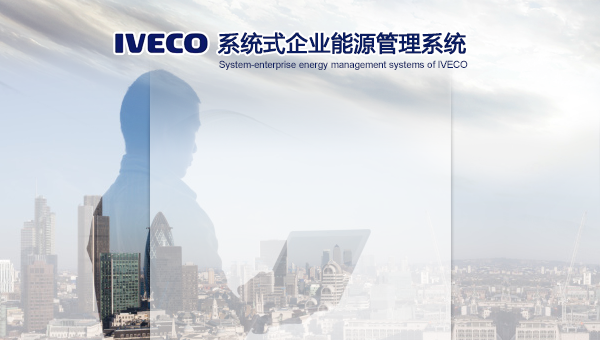
<style>
.page{position:relative;width:600px;height:340px}
.page>*{position:absolute;margin:0}
.t1{font:22px "MicrosoftYaHei";color:#0a1c60;font-weight:bold}
.t2{font:10px "ArialMT";color:#0a1c60}
</style>
<div class="page">
<p class="t1" style="left:218px;top:32px;width:248px;height:23px">系统式企业能源管理系统</p>
<p class="t2" style="left:219px;top:60px;width:249px;height:10px">System-enterprise energy management systems of IVECO</p>
</div>
